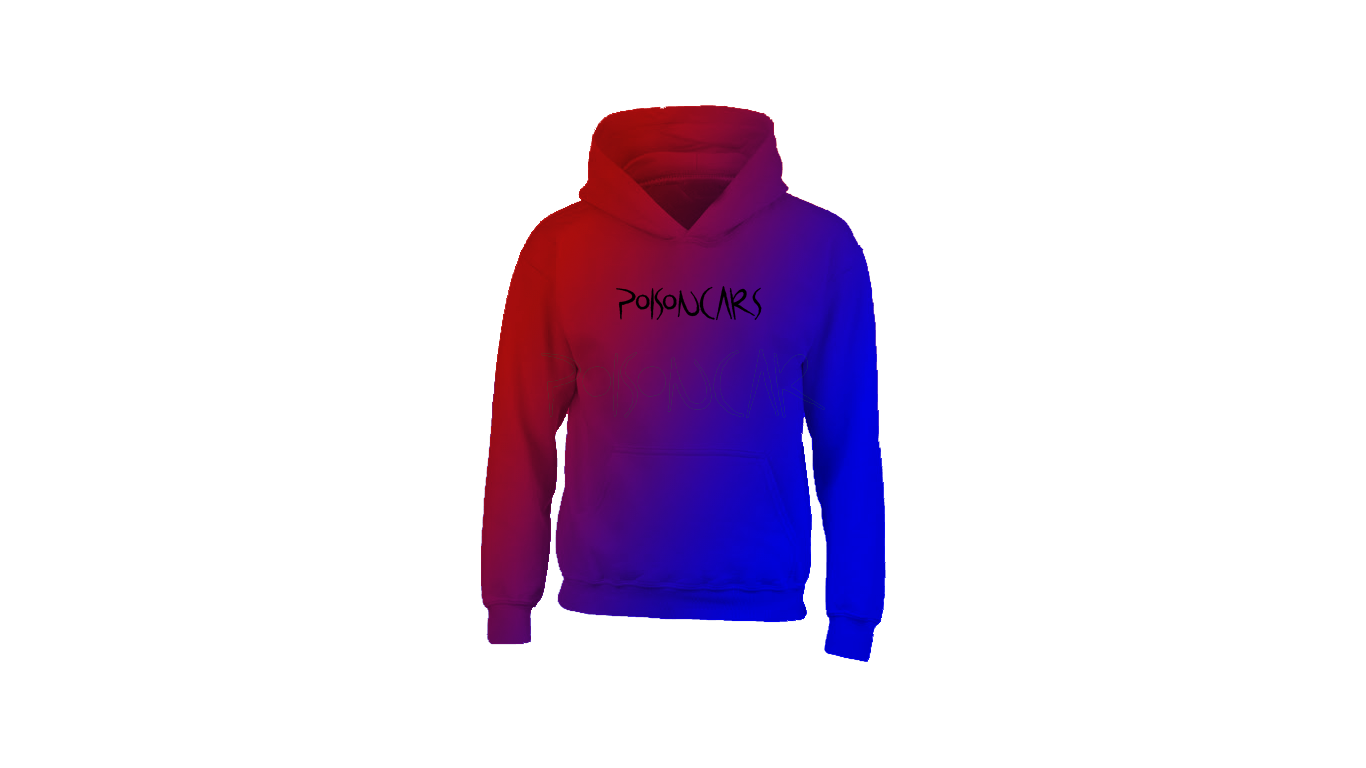
<style>
.page{position:relative;width:1366px;height:768px;background:#ffffff}
.page>*{position:absolute;margin:0}
.t1{font:50px "PoseidonAOE";color:#000000}
</style>
<div class="page">
<p class="t1" style="left:616px;top:286px;width:146px;height:35px">POISONCARS</p>
</div>
